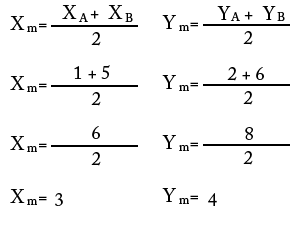
<style>
.page{position:relative;width:299px;height:225px;background:#ffffff}
.page>*{position:absolute;margin:0}
.t1{font:18.7px "ACaslonPro-Regular";color:#000000}
.t2{font:12px "ACaslonPro-Regular";color:#000000}
.t3{font:13.3px "ACaslonPro-Regular";color:#000000}
</style>
<div class="page">
<p class="t1" style="left:62px;top:5px;width:61px;height:14px">X   +  X</p>
<p class="t1" style="left:217px;top:6px;width:59px;height:14px">Y   +  Y</p>
<p class="t1" style="left:10px;top:16px;width:37px;height:14px">X   =</p>
<p class="t2" style="left:78px;top:13px;width:10px;height:9px">A</p>
<p class="t2" style="left:125px;top:13px;width:8px;height:9px">B</p>
<p class="t1" style="left:162px;top:15px;width:36px;height:14px">Y   =</p>
<p class="t2" style="left:230px;top:12px;width:10px;height:9px">A</p>
<p class="t2" style="left:277px;top:12px;width:8px;height:9px">B</p>
<p class="t3" style="left:27px;top:26px;width:10px;height:6px">m</p>
<p class="t3" style="left:179px;top:25px;width:10px;height:6px">m</p>
<p class="t1" style="left:91px;top:32px;width:10px;height:14px">2</p>
<p class="t1" style="left:243px;top:31px;width:10px;height:14px">2</p>
<p class="t1" style="left:74px;top:65px;width:36px;height:14px">1 + 5</p>
<p class="t1" style="left:10px;top:76px;width:37px;height:14px">X   =</p>
<p class="t1" style="left:162px;top:75px;width:36px;height:14px">Y   =</p>
<p class="t1" style="left:227px;top:67px;width:37px;height:14px">2 + 6</p>
<p class="t3" style="left:27px;top:86px;width:10px;height:6px">m</p>
<p class="t3" style="left:179px;top:85px;width:10px;height:6px">m</p>
<p class="t1" style="left:91px;top:92px;width:10px;height:14px">2</p>
<p class="t1" style="left:243px;top:91px;width:10px;height:14px">2</p>
<p class="t1" style="left:92px;top:126px;width:8px;height:13px">6</p>
<p class="t1" style="left:10px;top:136px;width:37px;height:14px">X   =</p>
<p class="t1" style="left:162px;top:135px;width:36px;height:14px">Y   =</p>
<p class="t1" style="left:245px;top:127px;width:8px;height:13px">8</p>
<p class="t3" style="left:27px;top:146px;width:10px;height:6px">m</p>
<p class="t3" style="left:179px;top:145px;width:10px;height:6px">m</p>
<p class="t1" style="left:91px;top:152px;width:10px;height:14px">2</p>
<p class="t1" style="left:243px;top:151px;width:10px;height:14px">2</p>
<p class="t1" style="left:10px;top:189px;width:37px;height:14px">X   =</p>
<p class="t1" style="left:55px;top:193px;width:8px;height:13px">3</p>
<p class="t1" style="left:162px;top:188px;width:36px;height:14px">Y   =</p>
<p class="t3" style="left:179px;top:198px;width:10px;height:6px">m</p>
<p class="t1" style="left:208px;top:193px;width:9px;height:13px">4</p>
<p class="t3" style="left:27px;top:199px;width:10px;height:6px">m</p>
</div>
